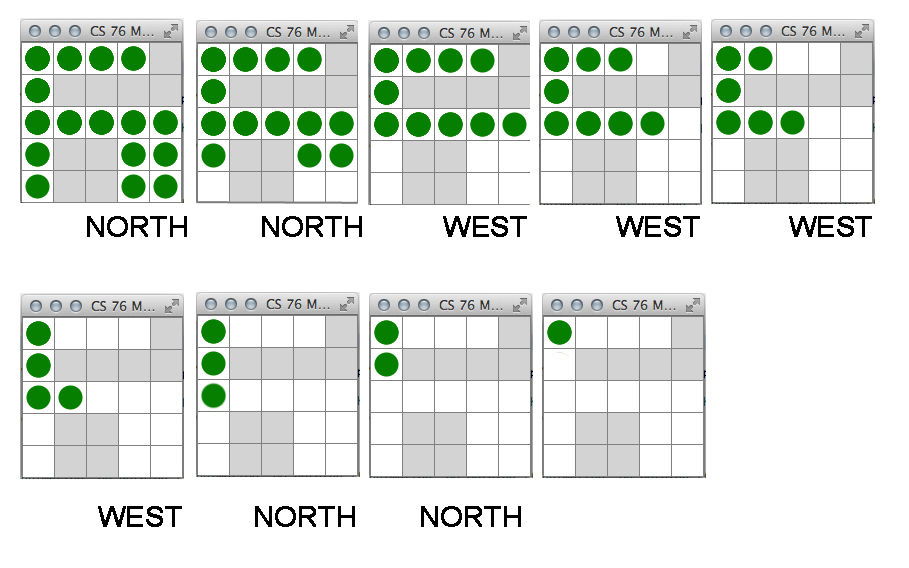
<style>
.page{position:relative;width:909px;height:568px;background:#ffffff}
.page>*{position:absolute;margin:0}
.t1{font:48px "ArialMT";color:#000000;font-weight:bold}
</style>
<div class="page">
<p class="t1" style="left:87px;top:216px;width:785px;height:21px">NORTH        NORTH         WEST          WEST          WEST</p>
<p class="t1" style="left:98px;top:506px;width:423px;height:21px">WEST        NORTH       NORTH</p>
</div>
